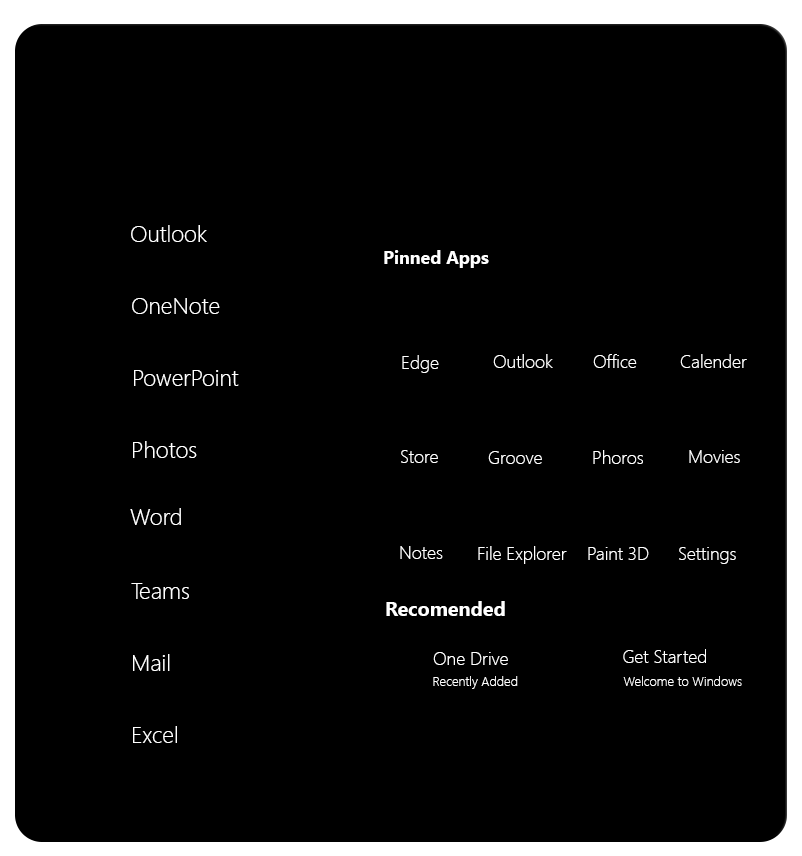
<style>
.page{position:relative;width:802px;height:856px;background:#000000}
.page>*{position:absolute;margin:0}
.t1{font:23.2px "SegoeUI-Light";letter-spacing:-0.005em;color:#ffffff}
.t2{font:18px "SegoeUI-Bold";letter-spacing:-0.005em;color:#ffffff}
.t3{font:18px "SegoeUI-Light";letter-spacing:-0.005em;color:#ffffff}
.t4{font:19.9px "SegoeUI-Bold";letter-spacing:-0.005em;color:#ffffff}
.t5{font:13.1px "SegoeUI-Light";letter-spacing:-0.005em;color:#ffffff}
</style>
<div class="page">
<p class="t1" style="left:131px;top:225px;width:76px;height:17px">Outlook</p>
<p class="t2" style="left:384px;top:250px;width:105px;height:18px">Pinned Apps</p>
<p class="t1" style="left:132px;top:298px;width:88px;height:16px">OneNote</p>
<p class="t3" style="left:402px;top:355px;width:37px;height:18px">Edge</p>
<p class="t3" style="left:493px;top:354px;width:60px;height:14px">Outlook</p>
<p class="t3" style="left:593px;top:354px;width:44px;height:14px">Office</p>
<p class="t3" style="left:680px;top:354px;width:67px;height:14px">Calender</p>
<p class="t1" style="left:134px;top:370px;width:105px;height:16px">PowerPoint</p>
<p class="t1" style="left:133px;top:441px;width:64px;height:17px">Photos</p>
<p class="t3" style="left:401px;top:450px;width:37px;height:13px">Store</p>
<p class="t3" style="left:488px;top:451px;width:54px;height:13px">Groove</p>
<p class="t3" style="left:593px;top:450px;width:50px;height:14px">Phoros</p>
<p class="t3" style="left:689px;top:450px;width:51px;height:13px">Movies</p>
<p class="t1" style="left:130px;top:508px;width:51px;height:17px">Word</p>
<p class="t3" style="left:400px;top:546px;width:43px;height:13px">Notes</p>
<p class="t3" style="left:478px;top:546px;width:89px;height:18px">File Explorer</p>
<p class="t3" style="left:588px;top:547px;width:61px;height:13px">Paint 3D</p>
<p class="t3" style="left:679px;top:547px;width:57px;height:17px">Settings</p>
<p class="t1" style="left:131px;top:583px;width:58px;height:16px">Teams</p>
<p class="t4" style="left:386px;top:601px;width:119px;height:15px">Recomended</p>
<p class="t1" style="left:133px;top:654px;width:37px;height:17px">Mail</p>
<p class="t3" style="left:433px;top:652px;width:75px;height:13px">One Drive</p>
<p class="t3" style="left:623px;top:649px;width:83px;height:14px">Get Started</p>
<p class="t5" style="left:433px;top:676px;width:85px;height:13px">Recently Added</p>
<p class="t5" style="left:623px;top:676px;width:119px;height:10px">Welcome to Windows</p>
<p class="t1" style="left:133px;top:726px;width:44px;height:17px">Excel</p>
</div>
